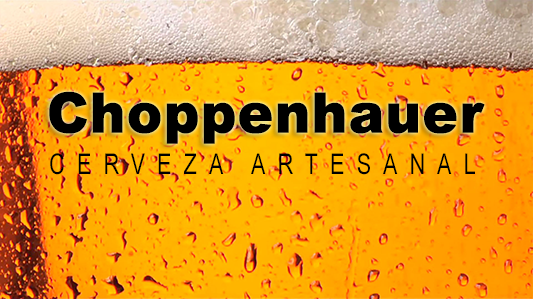
<style>
.page{position:relative;width:533px;height:299px}
.page>*{position:absolute;margin:0}
.t1{font:55.5px "Arial-Black";color:#000000;font-weight:bold;scale:0.96 1}
.t2{font:28.8px "ArialNarrow";letter-spacing:0.45em;color:#000000;scale:0.92 1}
</style>
<div class="page">
<p class="t1" style="left:49px;top:91px;width:436px;height:53px">Choppenhauer</p>
<p class="t2" style="left:50px;top:153px;width:425px;height:22px">CERVEZA ARTESANAL</p>
</div>
